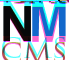
<style>
.page{position:relative;width:69px;height:60px;background:#ffffff}
.page>*{position:absolute;margin:0}
.t1{font:48px "Arial-BoldMT";color:#070809}
.t2{font:48px "Arial-BoldMT";color:#1268cb}
.t3{font:27.8px "TrajanPro-Regular"}
</style>
<div class="page">
<p class="t1" style="left:3px;top:1px;width:28px;height:35px">N</p>
<p class="t2" style="left:32px;top:1px;width:34px;height:35px">M</p>
<p class="t3" style="left:2px;top:37px;width:63px;height:21px">CMS</p>
</div>
